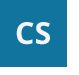
<style>
.page{position:relative;width:79px;height:75px;background:#11749e}
.page>*{position:absolute;margin:0}
.t1{font:30.5px "OpenSans-Bold";color:#f5f5f5;text-transform:uppercase}
</style>
<div class="page">
<p class="t1" style="left:16px;top:22px;width:34px;height:23px">CS</p>
</div>
